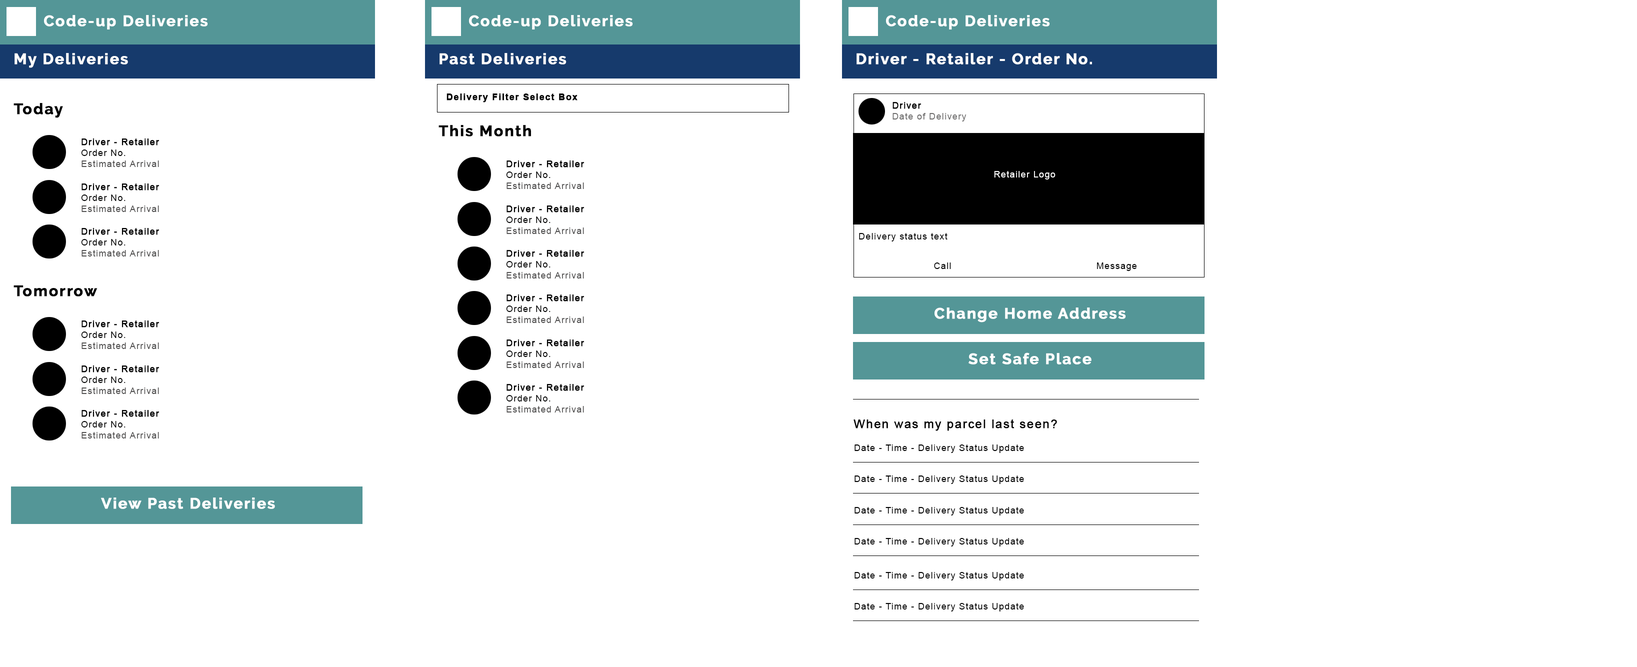
<style>
.page{position:relative;width:1637px;height:667px;background:#ffffff}
.page>*{position:absolute;margin:0}
.t1{font:15px "Raleway-Bold";letter-spacing:0.075em;color:#ffffff;font-weight:bold}
.t2{font:9px "Arial-BoldMT";letter-spacing:0.075em;color:#000000;font-weight:bold}
.t3{font:9px "ArialMT";letter-spacing:0.075em;color:#6f6e6e}
.t4{font:9px "ArialMT";letter-spacing:0.075em;color:#000000;font-weight:bold}
.t5{font:15px "Raleway-Bold";letter-spacing:0.075em;color:#000000;font-weight:bold}
.t6{font:9px "ArialMT";letter-spacing:0.075em;color:#000000}
.t7{font:9px "ArialMT";letter-spacing:0.075em;color:#535252}
.t8{font:9px "ArialMT";letter-spacing:0.075em;color:#ffffff}
.t9{font:12px "ArialMT";letter-spacing:0.075em;color:#000000;font-weight:bold}
</style>
<div class="page">
<p class="t1" style="left:44px;top:15px;width:164px;height:15px">Code-up Deliveries</p>
<p class="t1" style="left:469px;top:15px;width:164px;height:15px">Code-up Deliveries</p>
<p class="t1" style="left:886px;top:15px;width:164px;height:15px">Code-up Deliveries</p>
<p class="t1" style="left:14px;top:53px;width:114px;height:15px">My Deliveries</p>
<p class="t1" style="left:440px;top:53px;width:126px;height:11px">Past Deliveries</p>
<p class="t1" style="left:856px;top:53px;width:236px;height:11px">Driver - Retailer - Order No.</p>
<p class="t2" style="left:446px;top:94px;width:132px;height:8px">Delivery Filter Select Box</p>
<p class="t3" style="left:892px;top:102px;width:74px;height:20px"><span class="t4">Driver<br></span>Date of Delivery</p>
<p class="t5" style="left:14px;top:103px;width:49px;height:15px">Today</p>
<p class="t5" style="left:438px;top:125px;width:93px;height:11px">This Month</p>
<p class="t4" style="left:81px;top:138px;width:79px;height:29px">Driver - Retailer<br><span class="t6">Order No.<br></span><span class="t7">Estimated Arrival</span></p>
<p class="t4" style="left:506px;top:160px;width:78px;height:29px">Driver - Retailer<br><span class="t6">Order No.<br></span><span class="t7">Estimated Arrival</span></p>
<p class="t8" style="left:994px;top:171px;width:62px;height:9px">Retailer Logo</p>
<p class="t4" style="left:81px;top:184px;width:79px;height:28px">Driver - Retailer<br><span class="t6">Order No.<br></span><span class="t7">Estimated Arrival</span></p>
<p class="t4" style="left:506px;top:206px;width:78px;height:28px">Driver - Retailer<br><span class="t6">Order No.<br></span><span class="t7">Estimated Arrival</span></p>
<p class="t4" style="left:81px;top:228px;width:79px;height:28px">Driver - Retailer<br><span class="t6">Order No.<br></span><span class="t7">Estimated Arrival</span></p>
<p class="t6" style="left:859px;top:233px;width:89px;height:9px">Delivery status text</p>
<p class="t4" style="left:506px;top:250px;width:78px;height:28px">Driver - Retailer<br><span class="t6">Order No.<br></span><span class="t7">Estimated Arrival</span></p>
<p class="t6" style="left:934px;top:262px;width:17px;height:7px">Call</p>
<p class="t6" style="left:1097px;top:262px;width:40px;height:9px">Message</p>
<p class="t5" style="left:14px;top:285px;width:84px;height:11px">Tomorrow</p>
<p class="t4" style="left:506px;top:294px;width:78px;height:29px">Driver - Retailer<br><span class="t6">Order No.<br></span><span class="t7">Estimated Arrival</span></p>
<p class="t1" style="left:934px;top:308px;width:192px;height:14px">Change Home Address</p>
<p class="t4" style="left:81px;top:320px;width:79px;height:29px">Driver - Retailer<br><span class="t6">Order No.<br></span><span class="t7">Estimated Arrival</span></p>
<p class="t4" style="left:506px;top:340px;width:78px;height:28px">Driver - Retailer<br><span class="t6">Order No.<br></span><span class="t7">Estimated Arrival</span></p>
<p class="t1" style="left:968px;top:352px;width:124px;height:12px">Set Safe Place</p>
<p class="t4" style="left:81px;top:366px;width:79px;height:28px">Driver - Retailer<br><span class="t6">Order No.<br></span><span class="t7">Estimated Arrival</span></p>
<p class="t4" style="left:506px;top:384px;width:78px;height:28px">Driver - Retailer<br><span class="t6">Order No.<br></span><span class="t7">Estimated Arrival</span></p>
<p class="t4" style="left:81px;top:410px;width:79px;height:28px">Driver - Retailer<br><span class="t6">Order No.<br></span><span class="t7">Estimated Arrival</span></p>
<p class="t9" style="left:854px;top:419px;width:203px;height:12px">When was my parcel last seen?</p>
<p class="t6" style="left:854px;top:444px;width:170px;height:9px">Date - Time - Delivery Status Update</p>
<p class="t6" style="left:854px;top:476px;width:170px;height:8px">Date - Time - Delivery Status Update</p>
<p class="t1" style="left:101px;top:498px;width:174px;height:11px">View Past Deliveries</p>
<p class="t6" style="left:854px;top:507px;width:170px;height:9px">Date - Time - Delivery Status Update</p>
<p class="t6" style="left:854px;top:538px;width:170px;height:8px">Date - Time - Delivery Status Update</p>
<p class="t6" style="left:854px;top:572px;width:170px;height:8px">Date - Time - Delivery Status Update</p>
<p class="t6" style="left:854px;top:603px;width:170px;height:9px">Date - Time - Delivery Status Update</p>
</div>
